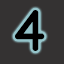
<style>
.page{position:relative;width:64px;height:64px;background:#343232}
.page>*{position:absolute;margin:0}
.t1{font:60px "Neon80s";color:#000000}
</style>
<div class="page">
<p class="t1" style="left:15px;top:10px;width:30px;height:41px">4</p>
</div>
